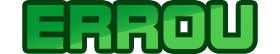
<style>
.page{position:relative;width:280px;height:54px;background:#004110}
.page>*{position:absolute;margin:0}
.t1{font:69.3px "DFSoGeiStd-W9";scale:0.92 1}
</style>
<div class="page">
<p class="t1" style="left:27px;top:5px;width:226px;height:44px">ERROU</p>
</div>
